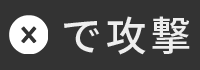
<style>
.page{position:relative;width:200px;height:70px;background:#333333}
.page>*{position:absolute;margin:0}
.t1{font:41px "SourceHanSansJP-Medium";letter-spacing:0.08em;color:#eeeeee}
</style>
<div class="page">
<p class="t1" style="left:64px;top:16px;width:126px;height:39px">で攻撃</p>
</div>
